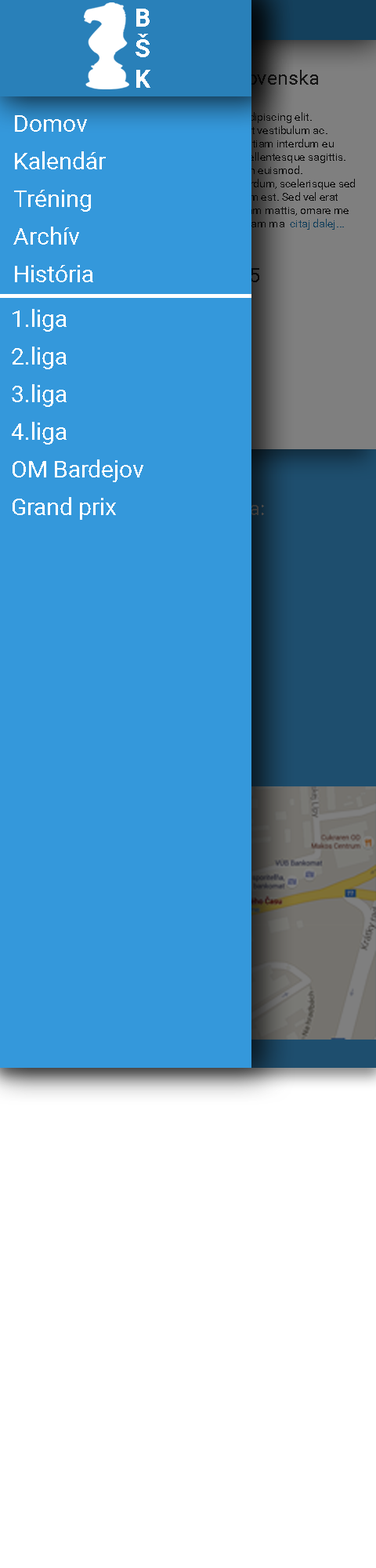
<style>
.page{position:relative;width:376px;height:1568px;background:#3498db}
.page>*{position:absolute;margin:0}
.t1{font:25.5px "Roboto-Bold";color:#ffffff}
.t2{font:23.5px "Roboto-Regular";color:#ffffff}
</style>
<div class="page">
<p class="t1" style="left:136px;top:9px;width:15px;height:79px">B<br>Š<br>K</p>
<p class="t2" style="left:13px;top:115px;width:93px;height:167px">Domov<br> <br>Kalendár<br> <br>Tréning<br> <br>Archív<br> <br>História</p>
<p class="t2" style="left:12px;top:309px;width:131px;height:211px">1.liga<br> <br>2.liga<br> <br>3.liga<br> <br>4.liga<br> <br>OM Bardejov<br> <br>Grand prix</p>
</div>
